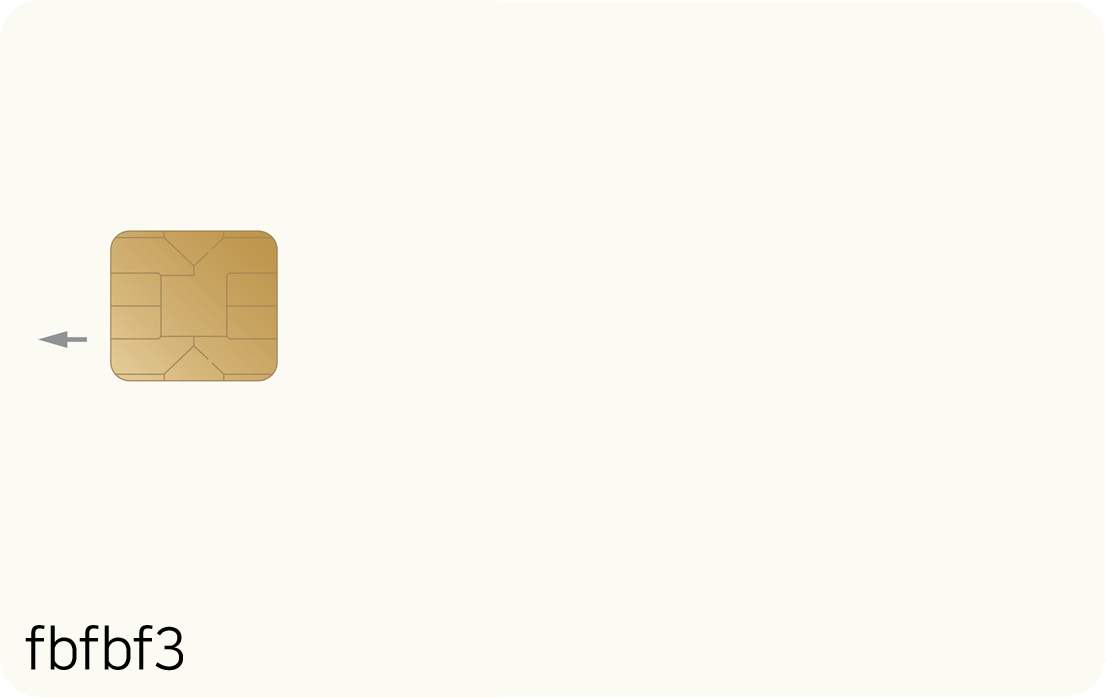
<style>
.page{position:relative;width:1106px;height:698px;background:#fbfbf3}
.page>*{position:absolute;margin:0}
.t1{font:58.3px "NanumSquareR";letter-spacing:0.005em;color:#000000}
</style>
<div class="page">
<p class="t1" style="left:25px;top:625px;width:158px;height:46px">fbfbf3</p>
</div>
